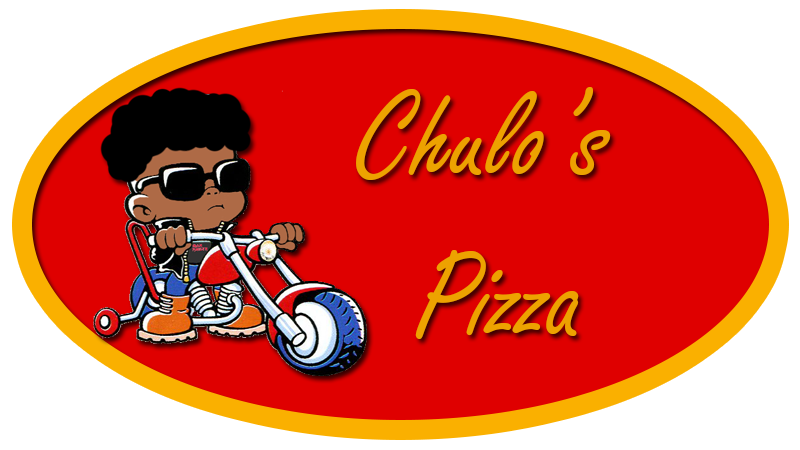
<style>
.page{position:relative;width:800px;height:450px;background:#df0000}
.page>*{position:absolute;margin:0}
.t1{font:133.3px "FreestyleScript-Regular";color:#eda200}
</style>
<div class="page">
<p class="t1" style="left:356px;top:87px;width:255px;height:252px;text-align:center">Chulo’s <br>Pizza</p>
</div>
